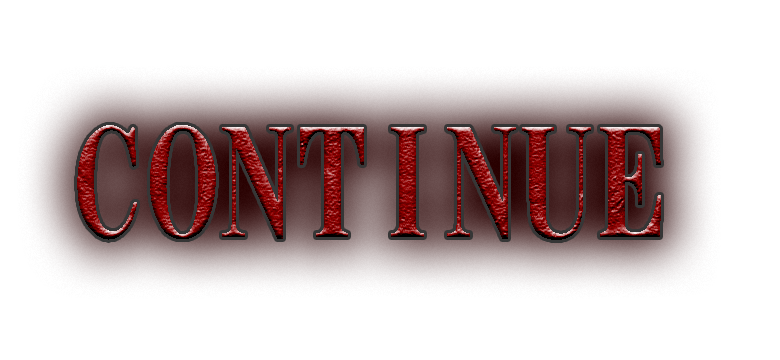
<style>
.page{position:relative;width:780px;height:360px;background:#ffffff}
.page>*{position:absolute;margin:0}
.t1{font:150px "HGMinchoE"}
</style>
<div class="page">
<p class="t1" style="left:77px;top:125px;width:584px;height:115px">CONTINUE</p>
</div>
